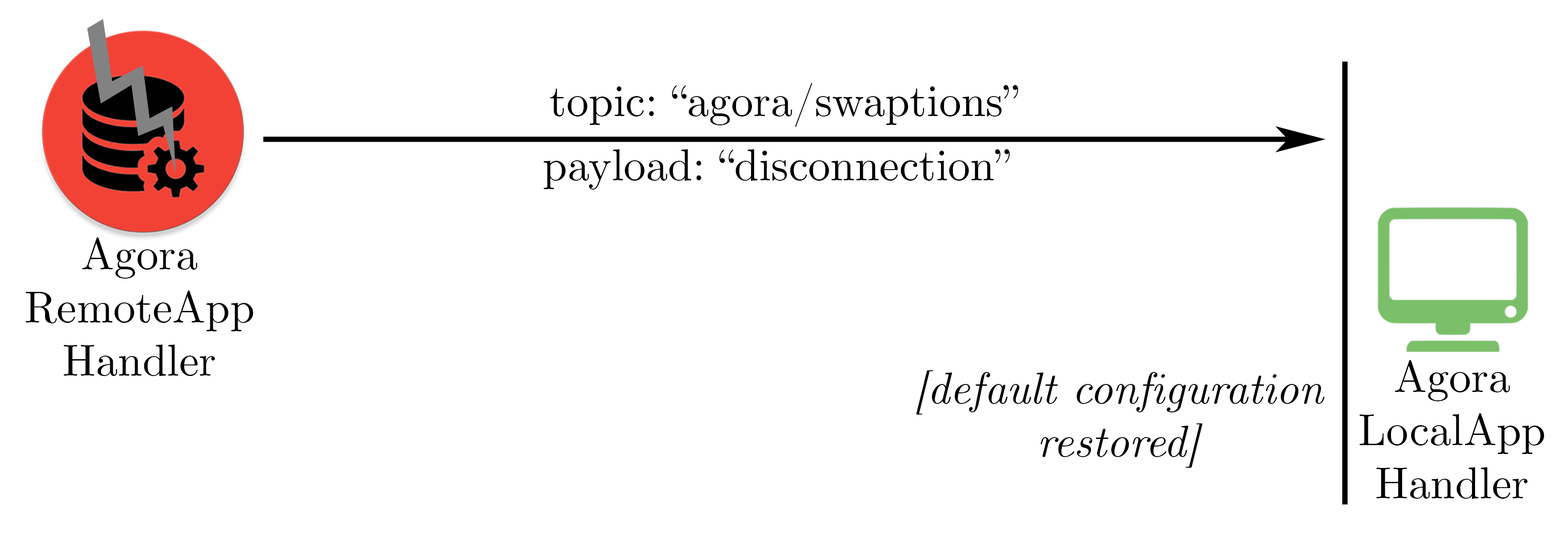
<style>
.page{position:relative;width:1568px;height:539px;background:#ffffff}
.page>*{position:absolute;margin:0}
.t1{font:44.3px "CMUSerif-Roman";color:#000000}
.t2{font:44.3px "CMUSerif-Italic";color:#000000}
</style>
<div class="page">
<p class="t1" style="left:550px;top:83px;width:468px;height:44px">topic: “agora/swaptions”</p>
<p class="t1" style="left:543px;top:149px;width:467px;height:40px">payload: “disconnection”</p>
<p class="t1" style="left:26px;top:237px;width:227px;height:139px;text-align:center">Agora<br>RemoteApp<br>Handler</p>
<p class="t1" style="left:1360px;top:360px;width:184px;height:138px;text-align:center">Agora<br>LocalApp<br>Handler</p>
<p class="t2" style="left:916px;top:370px;width:409px;height:97px;text-align:center">[default configuration<br>restored]</p>
</div>
